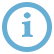
<style>
.page{position:relative;width:54px;height:54px;background:#ffffff}
.page>*{position:absolute;margin:0}
.t1{font:32px "IowanOldStyle-Black";color:#67aed4}
</style>
<div class="page">
<p class="t1" style="left:22px;top:12px;width:11px;height:25px">i</p>
</div>
